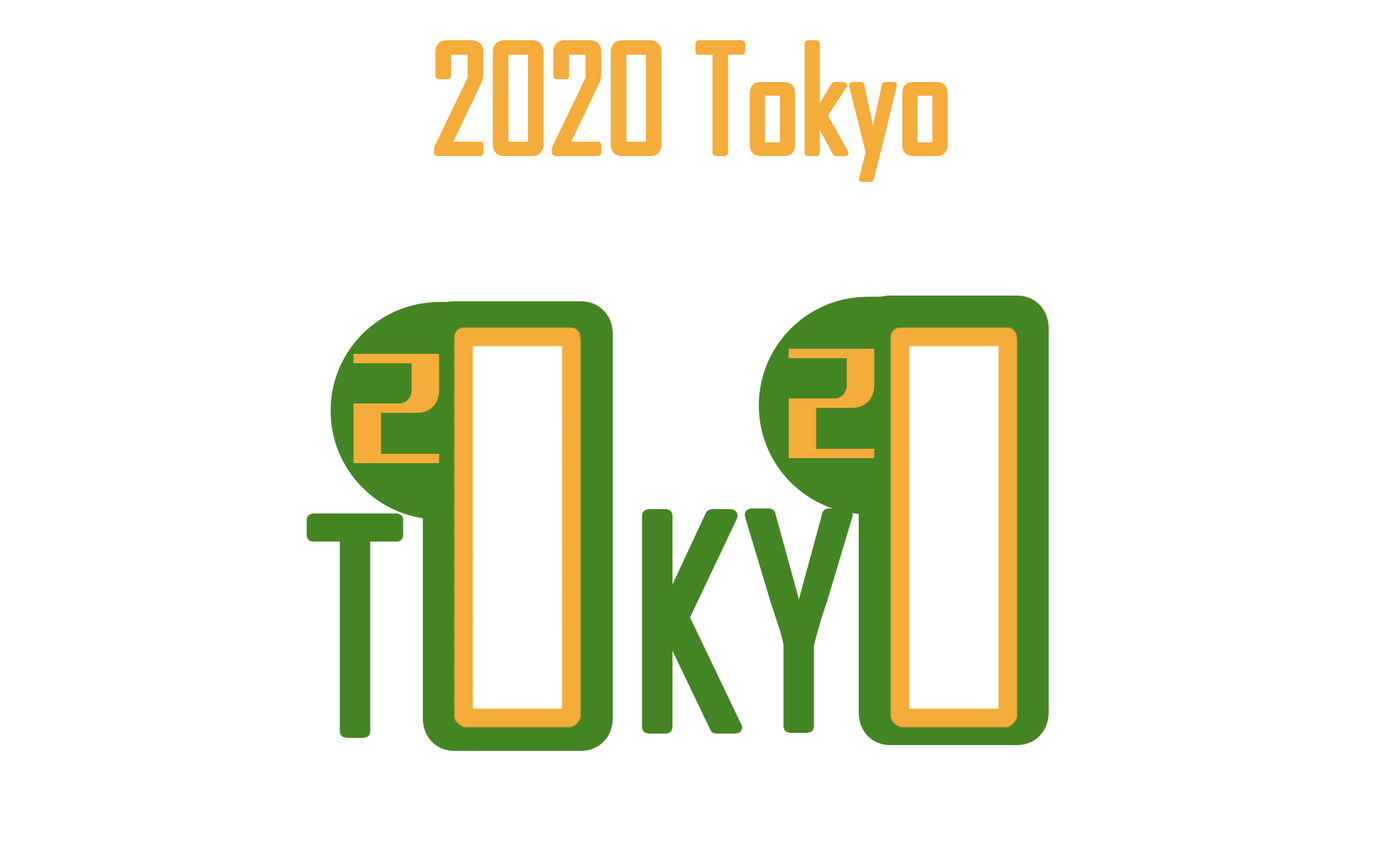
<style>
.page{position:relative;width:1381px;height:863px;background:#ffffff}
.page>*{position:absolute;margin:0}
.t1{font:143.9px "AgencyFB-Reg";color:#f4ac3b}
.t2{font:588.1px "AgencyFB-Reg";color:#448523}
.t3{font:119.3px "MFLiHei_Noncommercial-Regular";color:#f4ac3b}
.t4{font:278.3px "AgencyFB-Reg";color:#448523}
</style>
<div class="page">
<p class="t1" style="left:437px;top:43px;width:508px;height:136px">2020 Tokyo</p>
<p class="t2" style="left:422px;top:301px;width:191px;height:450px">O</p>
<p class="t2" style="left:858px;top:296px;width:191px;height:449px">O</p>
<p class="t3" style="left:353px;top:354px;width:87px;height:109px">2</p>
<p class="t3" style="left:788px;top:349px;width:87px;height:109px">2</p>
<p class="t4" style="left:312px;top:519px;width:86px;height:213px">T</p>
<p class="t4" style="left:647px;top:515px;width:90px;height:213px">K</p>
<p class="t4" style="left:750px;top:514px;width:97px;height:213px">Y</p>
</div>
